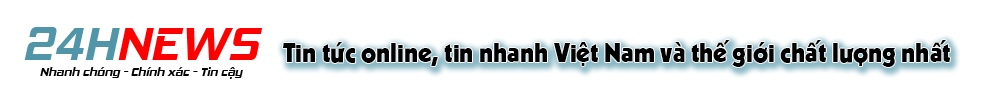
<style>
.page{position:relative;width:1000px;height:100px;background:#ffffff}
.page>*{position:absolute;margin:0}
.t1{font:33px "SVN-Internation";color:#000000}
</style>
<div class="page">
<p class="t1" style="left:283px;top:40px;width:668px;height:27px">Tin tức online, tin nhanh Việt Nam và thế giới chất lượng nhất</p>
</div>
